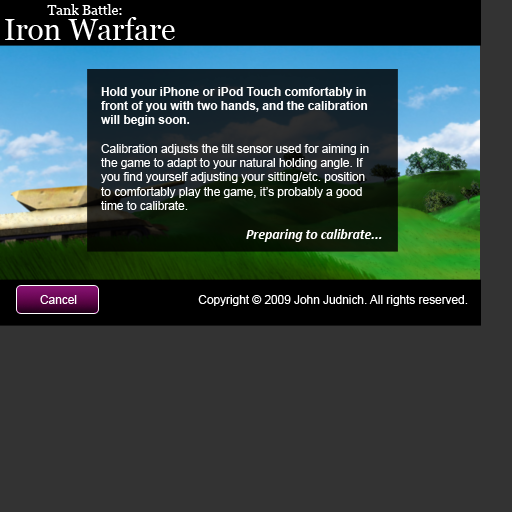
<style>
.page{position:relative;width:512px;height:512px;background:#333333}
.page>*{position:absolute;margin:0}
.t1{font:13.8px "Georgia";color:#ffffff}
.t2{font:29.6px "Georgia";color:#ffffff}
.t3{font:11.9px "ArialMT";color:#fefefe}
.t4{font:11.9px "Arial-BoldMT";color:#fefefe}
.t5{font:5.9px "Georgia";color:#000000}
.t6{font:13.8px "Calibri-BoldItalic";color:#fefefe}
.t7{font:11.9px "ArialMT";color:#ffffff}
</style>
<div class="page">
<p class="t1" style="left:47px;top:4px;width:75px;height:11px">Tank Battle:</p>
<p class="t2" style="left:5px;top:17px;width:170px;height:23px">Iron Warfare</p>
<p class="t3" style="left:101px;top:87px;width:268px;height:123px"><span class="t4">Hold your iPhone or iPod Touch comfortably in<br>front of you with two hands, and the calibration<br>will begin soon.<br><br></span>Calibration adjusts the tilt sensor used for aiming in<br>the game to adapt to your natural holding angle. If<br>you find yourself adjusting your sitting/etc. position<br>to comfortably play the game, it’s probably a good<br>time to calibrate.</p>
<p class="t5" style="left:111px;top:197px;width:8px;height:6px;opacity:0.62">JL</p>
<p class="t6" style="left:246px;top:229px;width:136px;height:13px">Preparing to calibrate...</p>
<p class="t7" style="left:40px;top:295px;width:37px;height:9px">Cancel</p>
<p class="t7" style="left:198px;top:295px;width:270px;height:11px">Copyright © 2009 John Judnich. All rights reserved.</p>
</div>
